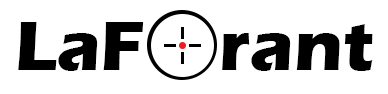
<style>
.page{position:relative;width:388px;height:94px;background:#ffffff}
.page>*{position:absolute;margin:0}
.t1{font:72px "ErasITC-Bold";color:#000000}
</style>
<div class="page">
<p class="t1" style="left:18px;top:22px;width:355px;height:49px">LaF   rant</p>
</div>
